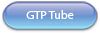
<style>
.page{position:relative;width:100px;height:33px}
.page>*{position:absolute;margin:0}
.t1{font:11.9px "MyriadPro-Regular";color:#ffffff}
</style>
<div class="page">
<p class="t1" style="left:26px;top:10px;width:48px;height:9px">GTP Tube</p>
</div>
